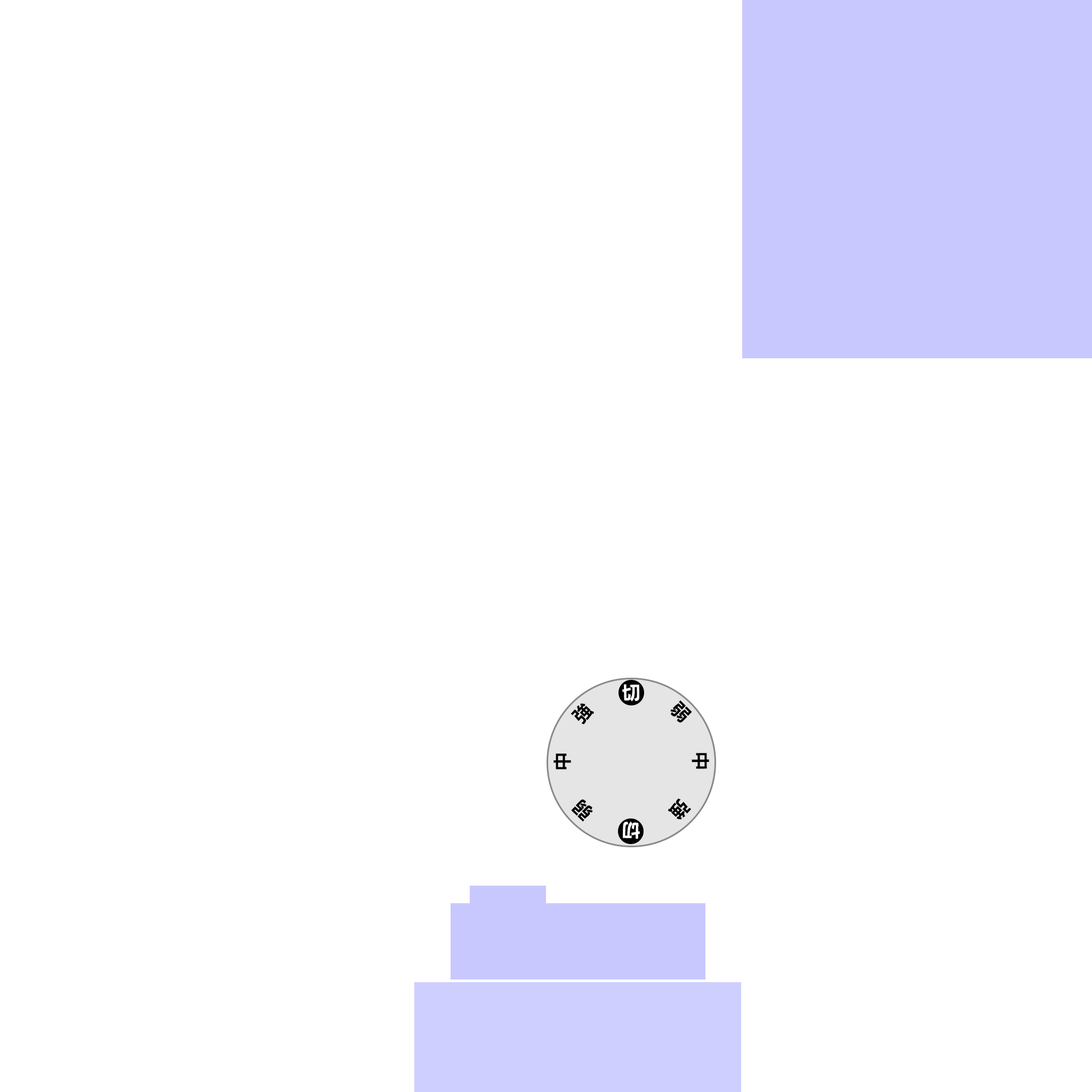
<style>
.page{position:relative;width:1092px;height:1092px;background:#ffffff}
.page>*{position:absolute;margin:0}
.t1{font:19.2px "RodinPro-B";color:#000000}
.t2{font:19.2px "RodinPro-B";color:#ffffff}
</style>
<div class="page">
<p class="t1" style="left:553px;top:684px;width:156px;height:155px;rotate:-31deg"><span class="t2"> 切 </span>弱 中 強<span class="t2"> 切 </span>弱 中 強</p>
</div>
